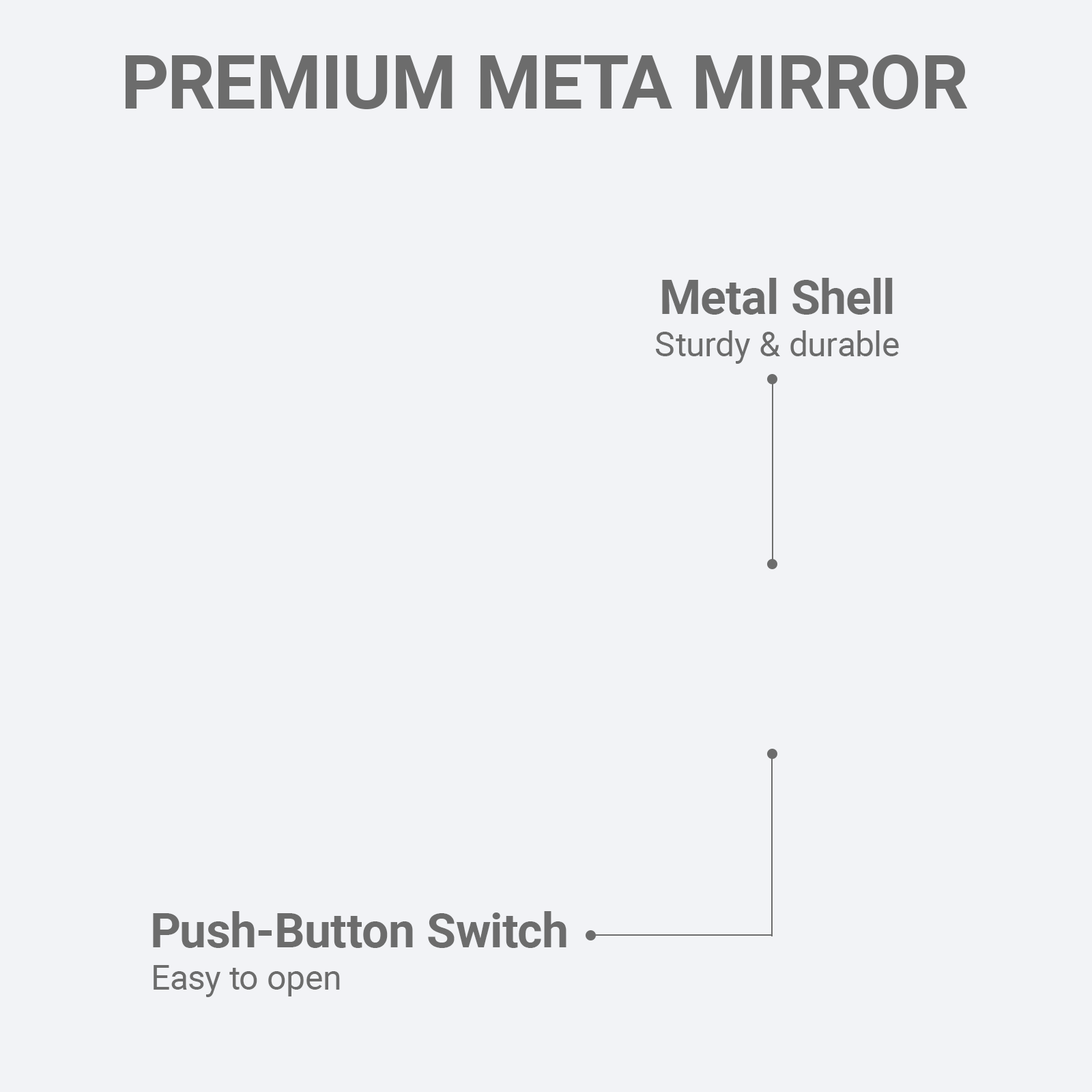
<style>
.page{position:relative;width:1092px;height:1092px;background:#f2f3f6}
.page>*{position:absolute;margin:0}
.t1{font:75.1px "Roboto-Bold";color:#6c6c6c}
.t2{font:47.8px "Roboto-Bold";color:#6c6c6c}
.t3{font:34.1px "Roboto-Regular";color:#6c6c6c}
</style>
<div class="page">
<p class="t1" style="left:125px;top:55px;width:842px;height:54px">PREMIUM META MIRROR</p>
<p class="t2" style="left:662px;top:278px;width:231px;height:37px">Metal Shell</p>
<p class="t3" style="left:656px;top:330px;width:243px;height:34px">Sturdy &amp; durable</p>
<p class="t2" style="left:153px;top:911px;width:413px;height:37px">Push-Button Switch</p>
<p class="t3" style="left:154px;top:965px;width:186px;height:32px">Easy to open</p>
</div>
